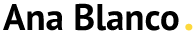
<style>
.page{position:relative;width:196px;height:34px;background:#ffffff}
.page>*{position:absolute;margin:0}
.t1{font:37px "PTSans-Bold";color:#000000}
.t2{font:44px "PTSans-Bold";color:#fdd93d}
</style>
<div class="page">
<p class="t1" style="left:2px;top:3px;width:191px;height:28px">Ana Blanco <span class="t2">.</span></p>
</div>
